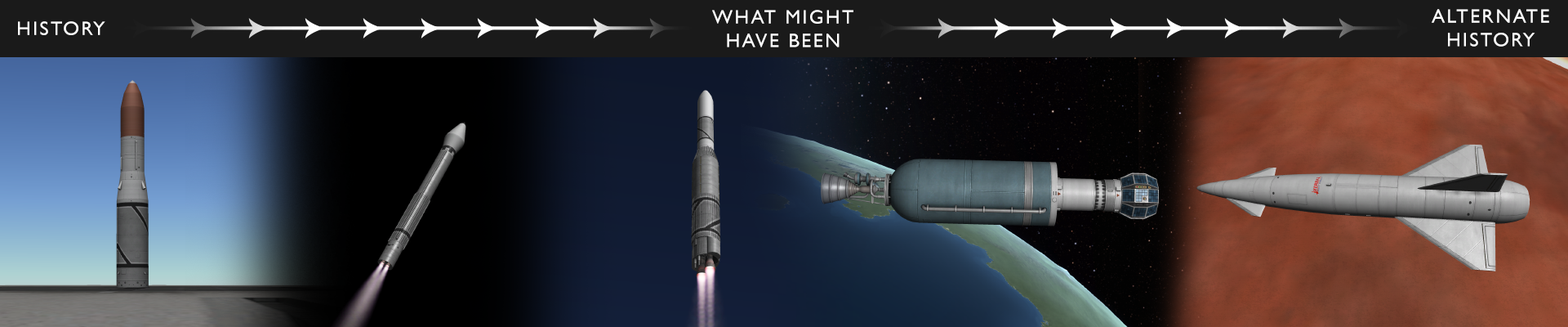
<style>
.page{position:relative;width:1568px;height:327px}
.page>*{position:absolute;margin:0}
.t1{font:19.6px "GillSansMT";letter-spacing:0.1em;color:#ffffff}
</style>
<div class="page">
<p class="t1" style="left:712px;top:10px;width:141px;height:37px;text-align:center">WHAT MIGHT<br>HAVE BEEN</p>
<p class="t1" style="left:1432px;top:9px;width:117px;height:38px;text-align:center">ALTERNATE<br>HISTORY</p>
<p class="t1" style="left:18px;top:21px;width:87px;height:14px">HISTORY</p>
</div>
